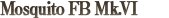
<style>
.page{position:relative;width:169px;height:18px;background:#ffffff}
.page>*{position:absolute;margin:0}
.t1{font:18px "RyuminPro-ExBold";letter-spacing:-0.08em;color:#4a3f32;font-weight:bold;scale:0.9 1}
</style>
<div class="page">
<p class="t1" style="left:0px;top:1px;width:138px;height:18px">Mosquito FB Mk.VI</p>
</div>
